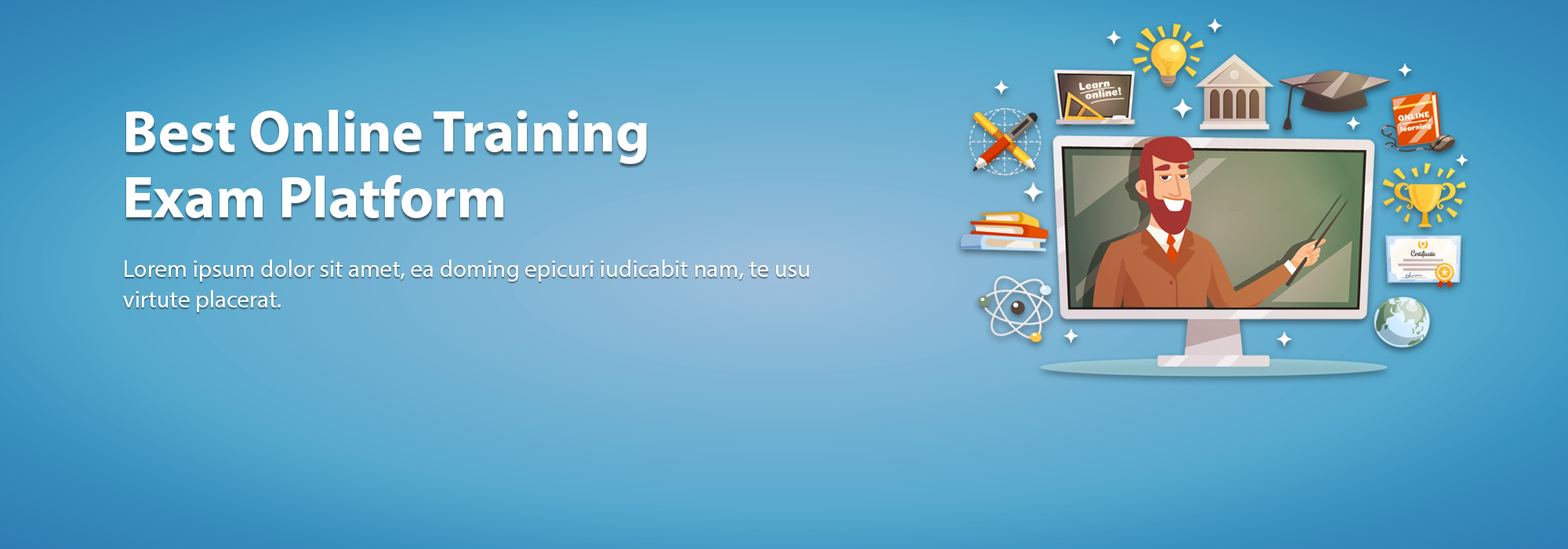
<style>
.page{position:relative;width:1568px;height:549px}
.page>*{position:absolute;margin:0}
.t1{font:58.8px/65.9px "MyriadPro-Bold";color:#ffffff}
.t2{font:24.3px/30.6px "MyriadPro-Regular";color:#ffffff}
</style>
<div class="page">
<p class="t1" style="left:126px;top:110px;width:521px;height:108px">Best Online Training <br>Exam Platform</p>
<p class="t2" style="left:123px;top:260px;width:686px;height:52px">Lorem ipsum dolor sit amet, ea doming epicuri iudicabit nam, te usu virtute placerat.</p>
</div>
